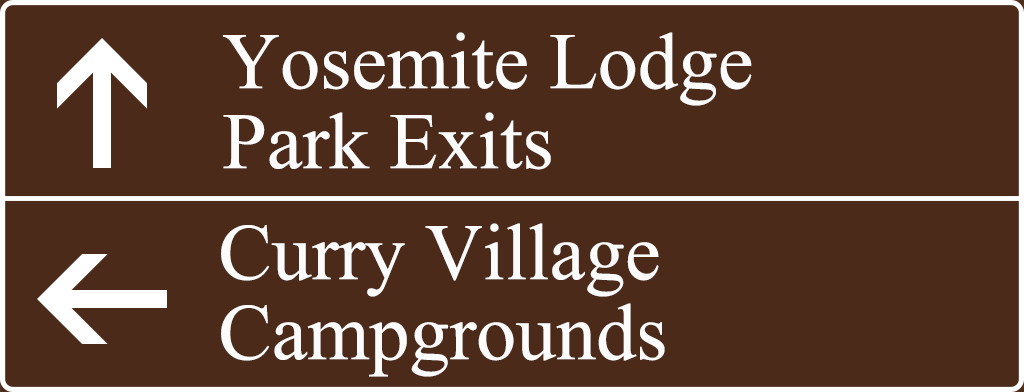
<style>
.page{position:relative;width:1024px;height:392px;background:#4c2a19}
.page>*{position:absolute;margin:0}
.t1{font:80px/80px "IskoolaPota";color:#fbfbfb}
</style>
<div class="page">
<p class="t1" style="left:223px;top:32px;width:529px;height:138px">Yosemite Lodge<br>Park Exits</p>
<p class="t1" style="left:221px;top:223px;width:444px;height:154px">Curry Village<br>Campgrounds</p>
</div>
